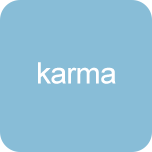
<style>
.page{position:relative;width:152px;height:152px;background:#88bdd7}
.page>*{position:absolute;margin:0}
.t1{font:29.6px "ArialMT";letter-spacing:-0.025em;color:#ffffff}
</style>
<div class="page">
<p class="t1" style="left:38px;top:62px;width:78px;height:22px">karma</p>
</div>
